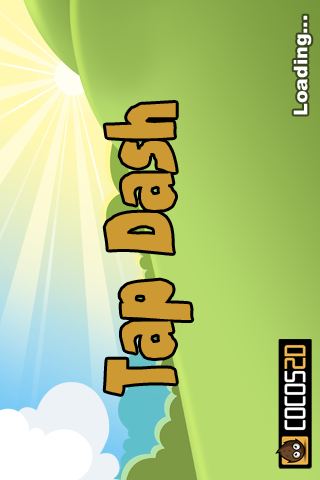
<style>
.page{position:relative;width:320px;height:480px}
.page>*{position:absolute;margin:0}
.t1{font:19px "Arial-Black";color:#ffffff}
.t2{font:72px "StrandedBRK";color:#cc9933;scale:0.72 1}
</style>
<div class="page">
<p class="t1" style="left:293px;top:15px;width:19px;height:100px;rotate:-90deg">Loading...</p>
<p class="t2" style="left:105px;top:103px;width:87px;height:291px;rotate:-90deg">Tap Dash</p>
</div>
